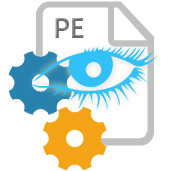
<style>
.page{position:relative;width:171px;height:171px;background:#ffffff}
.page>*{position:absolute;margin:0}
.t1{font:28.5px "DengXian-Bold"}
</style>
<div class="page">
<p class="t1" style="left:55px;top:18px;width:29px;height:20px">PE</p>
</div>
